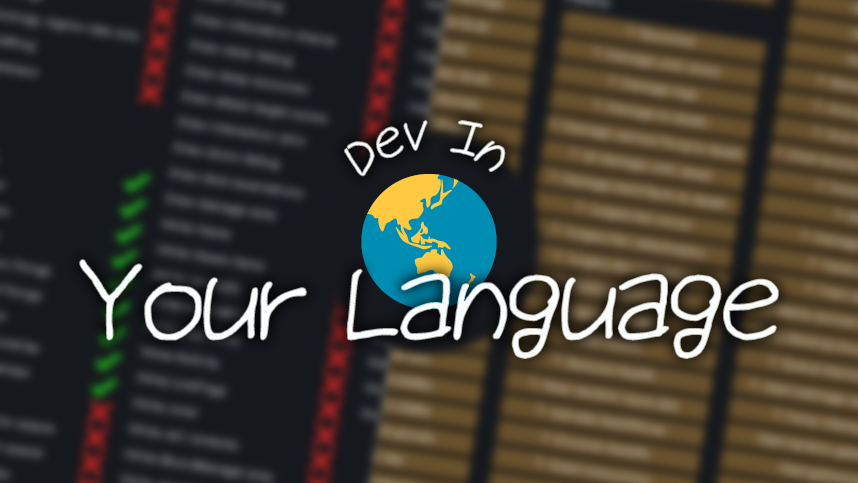
<style>
.page{position:relative;width:858px;height:483px}
.page>*{position:absolute;margin:0}
.t1{font:60px "NanumGoDigANiGoGoDing";color:#fbffff}
.t2{font:128px "NanumGoDigANiGoGoDing";color:#fbffff}
</style>
<div class="page">
<p class="t1" style="left:345px;top:121px;width:160px;height:55px">Dev In</p>
<p class="t2" style="left:80px;top:260px;width:698px;height:98px">Your Language</p>
</div>
